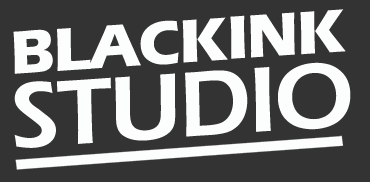
<style>
.page{position:relative;width:370px;height:182px;background:#333333}
.page>*{position:absolute;margin:0}
.t1{font:63.3px "ErasITC-Bold";letter-spacing:-0.025em;color:#fcfdfd;text-transform:uppercase}
.t2{font:95.9px "ErasITC-Demi";letter-spacing:-0.025em;color:#fcfdfd;text-transform:uppercase}
</style>
<div class="page">
<p class="t1" style="left:13px;top:17px;width:215px;height:57px;rotate:-4deg">BLACK</p>
<p class="t1" style="left:230px;top:9px;width:116px;height:50px;rotate:-4deg">INK</p>
<p class="t2" style="left:14px;top:62px;width:337px;height:86px;rotate:-4deg">STUDIO</p>
</div>
